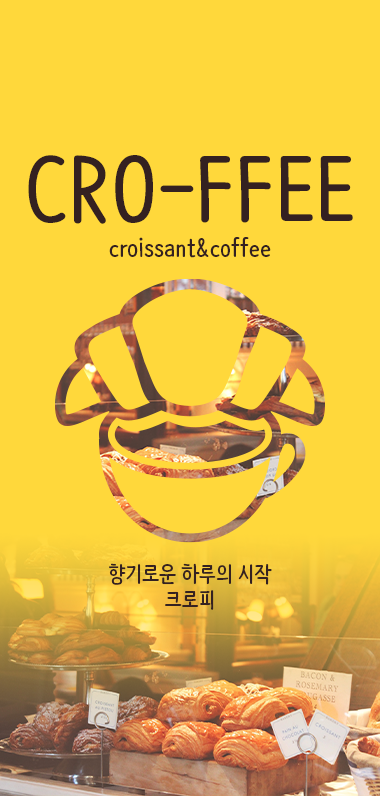
<style>
.page{position:relative;width:380px;height:796px;background:#ffd83b}
.page>*{position:absolute;margin:0}
.t1{font:84px "NanumBarunpenOTF-Bold";color:#342121}
.t2{font:24px "NanumBarunpenOTF-Bold";color:#342121}
.t3{font:21.8px "NanumBarunpenOTF-Bold";color:#342121}
</style>
<div class="page">
<p class="t1" style="left:28px;top:155px;width:325px;height:69px">CRO-FFEE</p>
<p class="t2" style="left:109px;top:237px;width:162px;height:21px">croissant&amp;coffee</p>
<p class="t3" style="left:109px;top:563px;width:163px;height:47px;text-align:center">향기로운 하루의 시작<br>크로피</p>
</div>
